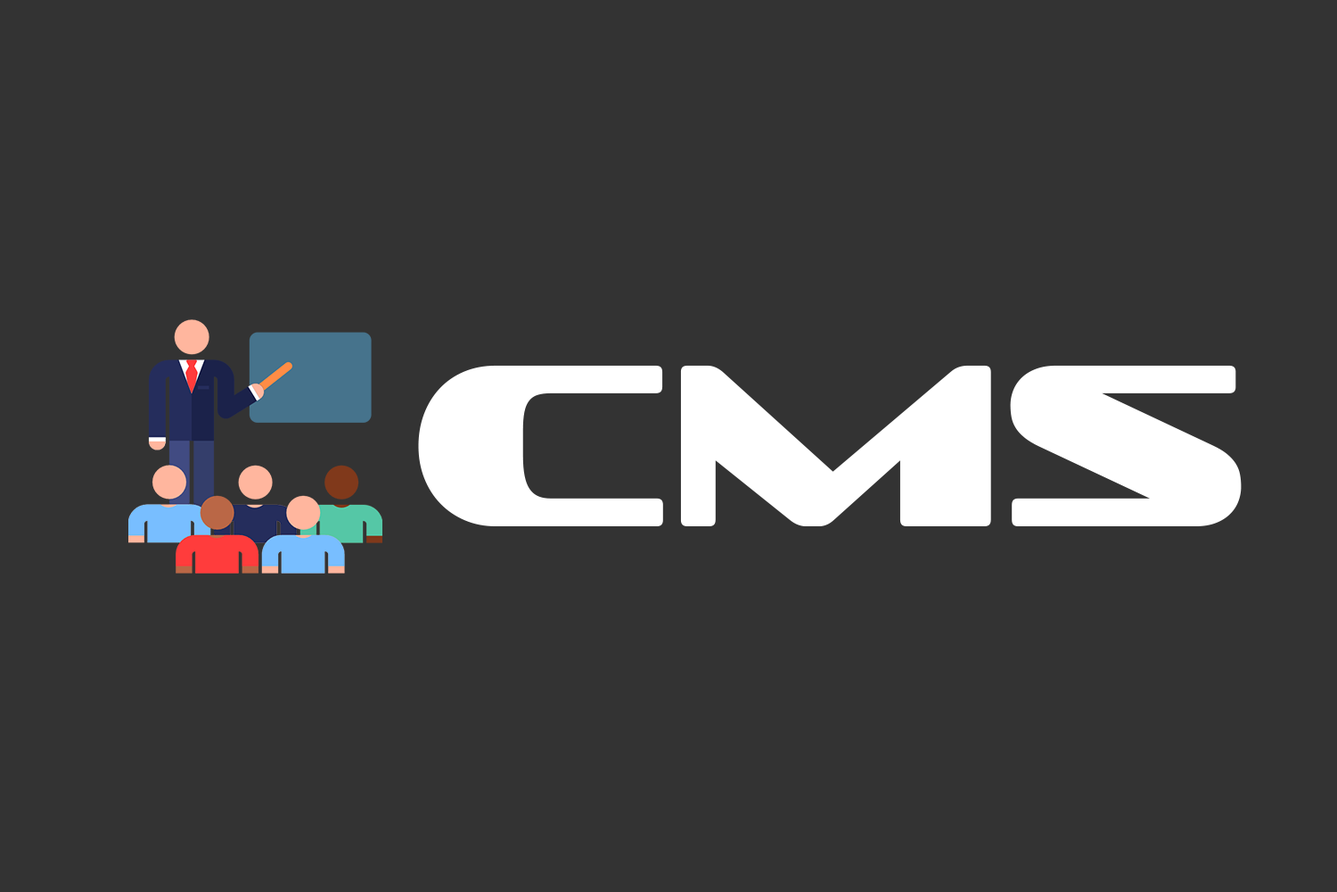
<style>
.page{position:relative;width:1337px;height:892px;background:#333333}
.page>*{position:absolute;margin:0}
.t1{font:235.4px "SofachromeRg-Regular";color:#ffffff}
</style>
<div class="page">
<p class="t1" style="left:418px;top:365px;width:824px;height:161px">CMS</p>
</div>
